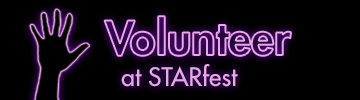
<style>
.page{position:relative;width:360px;height:100px;background:#000000}
.page>*{position:absolute;margin:0}
.t1{font:45.8px "FuturaStd-Heavy"}
.t2{font:25px "FuturaStd-Medium";color:#e7a9e5}
</style>
<div class="page">
<p class="t1" style="left:104px;top:16px;width:187px;height:40px">Volunteer</p>
<p class="t2" style="left:121px;top:64px;width:117px;height:23px">at STARfest</p>
</div>
